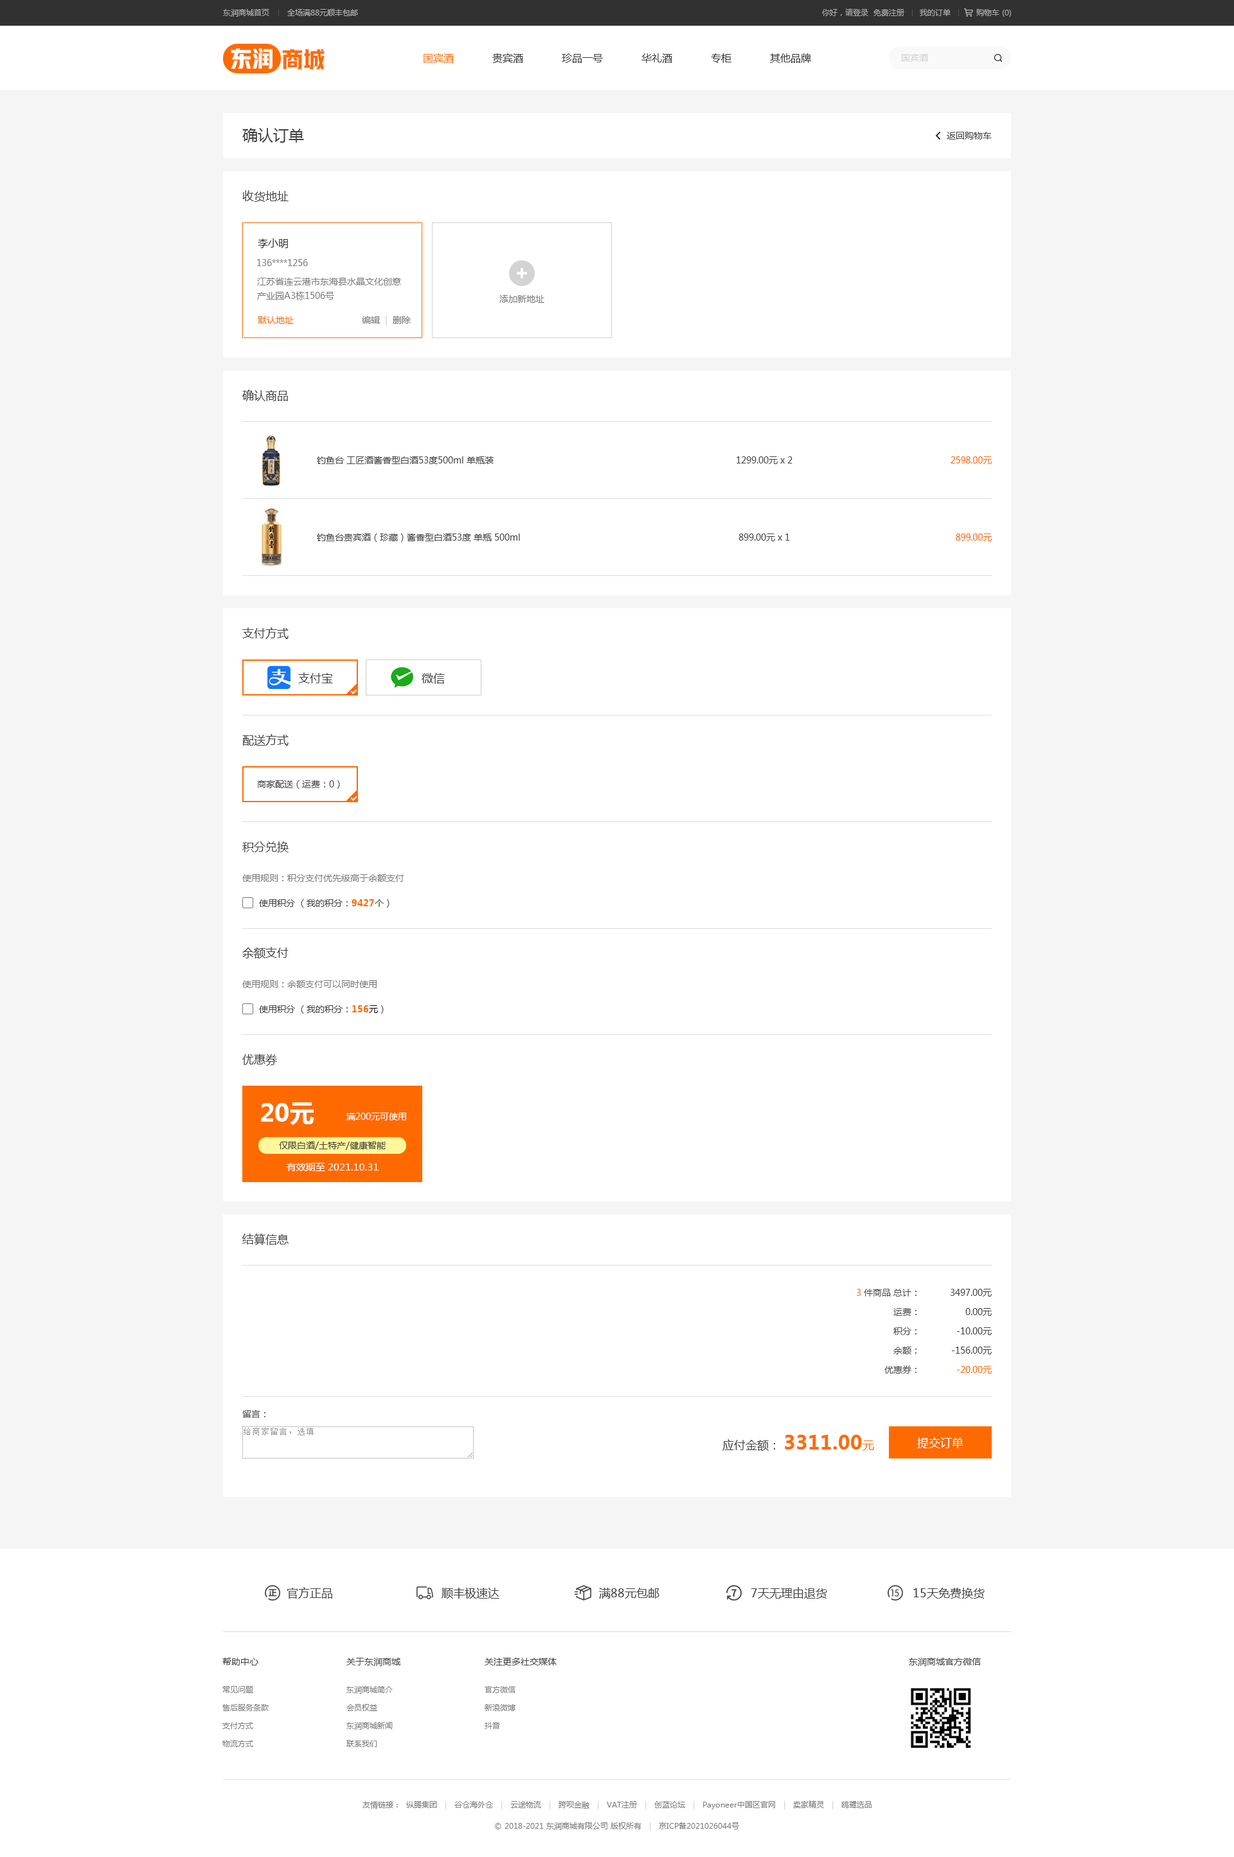
<style>
.page{position:relative;width:1234px;height:1857px;background:#ffffff}
.page>*{position:absolute;margin:0}
.t1{font:7.7px "MicrosoftYaHei";color:#b0b0b0}
.t2{font:7.7px "MicrosoftYaHei";color:#acacac}
.t3{font:21.9px "HYYakuHei-HEW";color:#ffffff}
.t4{font:21.9px "HYYakuHei-HEW";color:#ff6a00}
.t5{font:10.3px "MicrosoftYaHei";color:#333333}
.t6{font:10.3px "MicrosoftYaHei";color:#ff6a00}
.t7{font:9px "MicrosoftYaHei";color:#d2d2d2}
.t8{font:15.4px "MicrosoftYaHei";color:#434343}
.t9{font:9px "MicrosoftYaHei";color:#434343}
.t10{font:11.6px "MicrosoftYaHei";color:#434343}
.t11{font:10.3px "MicrosoftYaHei";color:#313131}
.t12{font:9px "MicrosoftYaHei";color:#7d7d7d}
.t13{font:9px/14.1px "MicrosoftYaHei";color:#7d7d7d}
.t14{font:9px "MicrosoftYaHei";color:#ff6a00}
.t15{font:9px "MicrosoftYaHei-Bold";color:#ff6a00}
.t16{font:9px "MicrosoftYaHei";color:#000000}
.t17{font:24.4px "MicrosoftYaHei-Bold";color:#ffffff}
.t18{font:9px "MicrosoftYaHei";color:#ffffff}
.t19{font:9.6px "MicrosoftYaHei";color:#ffffff}
.t20{font:9px/19.3px "MicrosoftYaHei";color:#4b4b4b}
.t21{font:9px/19.3px "MicrosoftYaHei";color:#ff6a00}
.t22{font:9px/19.3px "MicrosoftYaHei";color:#434343}
.t23{font:9px "MicrosoftYaHei";color:#4b4b4b}
.t24{font:19.3px "MicrosoftYaHei-Bold";color:#ff6a00}
.t25{font:11.6px "MicrosoftYaHei";color:#ff6a00}
.t26{font:11.6px "MicrosoftYaHei";color:#ffffff}
.t27{font:7.7px/18px "MicrosoftYaHei";color:#7d7d7d}
.t28{font:7.7px "MicrosoftYaHei";color:#7d7d7d}
.t29{font:7.7px "MicrosoftYaHei";color:#d2d2d2}
</style>
<div class="page">
<p class="t1" style="left:223px;top:9px;width:135px;height:8px">东润商城首页       全场满88元顺丰包邮</p>
<p class="t2" style="left:822px;top:8px;width:190px;height:9px">你好，请登录  免费注册      我的订单          购物车 (0)</p>
<p class="t3" style="left:231px;top:48px;width:42px;height:21px">东润</p>
<p class="t4" style="left:282px;top:49px;width:43px;height:20px">商城</p>
<p class="t5" style="left:424px;top:53px;width:387px;height:10px"><span class="t6">国宾酒</span>            贵宾酒            珍品一号            华礼酒            专柜            其他品牌</p>
<p class="t7" style="left:902px;top:54px;width:26px;height:8px">国宾酒</p>
<p class="t8" style="left:242px;top:128px;width:62px;height:15px">确认订单</p>
<p class="t9" style="left:947px;top:132px;width:45px;height:8px">返回购物车</p>
<p class="t10" style="left:242px;top:190px;width:47px;height:12px">收货地址</p>
<p class="t11" style="left:258px;top:239px;width:30px;height:9px">李小明</p>
<p class="t12" style="left:257px;top:259px;width:51px;height:7px">136****1256</p>
<p class="t13" style="left:257px;top:278px;width:144px;height:22px">江苏省连云港市东海县水晶文化创意<br>产业园A3栋1506号</p>
<p class="t12" style="left:500px;top:295px;width:44px;height:8px">添加新地址</p>
<p class="t14" style="left:258px;top:316px;width:36px;height:8px">默认地址</p>
<p class="t12" style="left:362px;top:316px;width:49px;height:9px">编辑 <span class="t7"> |</span>  删除</p>
<p class="t10" style="left:242px;top:390px;width:46px;height:11px">确认商品</p>
<p class="t9" style="left:317px;top:456px;width:177px;height:8px">钓鱼台 工匠酒酱香型白酒53度500ml 单瓶装</p>
<p class="t9" style="left:737px;top:456px;width:56px;height:8px">1299.00元 x 2</p>
<p class="t14" style="left:951px;top:456px;width:42px;height:8px">2598.00元</p>
<p class="t9" style="left:317px;top:534px;width:203px;height:8px">钓鱼台贵宾酒（珍藏）酱香型白酒53度 单瓶 500ml</p>
<p class="t9" style="left:739px;top:534px;width:51px;height:7px">899.00元 x 1</p>
<p class="t14" style="left:956px;top:534px;width:37px;height:7px">899.00元</p>
<p class="t10" style="left:242px;top:627px;width:47px;height:12px">支付方式</p>
<p class="t10" style="left:298px;top:672px;width:35px;height:11px">支付宝</p>
<p class="t10" style="left:422px;top:673px;width:23px;height:11px">微信</p>
<p class="t10" style="left:242px;top:734px;width:47px;height:12px">配送方式</p>
<p class="t9" style="left:257px;top:780px;width:83px;height:9px">商家配送（运费：0）</p>
<p class="t10" style="left:242px;top:842px;width:47px;height:10px">积分兑换</p>
<p class="t12" style="left:242px;top:874px;width:162px;height:8px">使用规则：积分支付优先级高于余额支付</p>
<p class="t9" style="left:259px;top:899px;width:131px;height:9px">使用积分 （我的积分：<span class="t15">9427</span>个）</p>
<p class="t10" style="left:242px;top:947px;width:47px;height:12px">余额支付</p>
<p class="t12" style="left:242px;top:980px;width:135px;height:8px">使用规则：余额支付可以同时使用</p>
<p class="t9" style="left:259px;top:1005px;width:125px;height:9px">使用积分 （我的积分：<span class="t15">156</span><span class="t16">元</span>）</p>
<p class="t10" style="left:242px;top:1054px;width:35px;height:12px">优惠券</p>
<p class="t17" style="left:261px;top:1102px;width:53px;height:23px">20元</p>
<p class="t18" style="left:346px;top:1113px;width:60px;height:7px">满200元可使用</p>
<p class="t9" style="left:279px;top:1142px;width:107px;height:8px">仅限白酒/土特产/健康智能</p>
<p class="t19" style="left:287px;top:1163px;width:92px;height:8px">有效期至 2021.10.31</p>
<p class="t10" style="left:242px;top:1234px;width:47px;height:11px">结算信息</p>
<p class="t20" style="left:857px;top:1289px;width:60px;height:85px;text-align:right"><span class="t21">3</span> 件商品 总计：<br>运费：<br>积分：<br>余额：<br>优惠券：</p>
<p class="t22" style="left:951px;top:1289px;width:41px;height:85px;text-align:right">3497.00元<br>0.00元<br>-10.00元<br>-156.00元<br><span class="t21">-20.00元</span></p>
<p class="t23" style="left:242px;top:1410px;width:24px;height:8px">留言：</p>
<p class="t24" style="left:723px;top:1434px;width:151px;height:17px"><span class="t10">应付金额： </span>3311.00<span class="t25">元</span></p>
<p class="t26" style="left:917px;top:1437px;width:47px;height:11px">提交订单</p>
<p class="t10" style="left:287px;top:1587px;width:45px;height:12px">官方正品</p>
<p class="t10" style="left:442px;top:1588px;width:58px;height:11px">顺丰极速达</p>
<p class="t10" style="left:599px;top:1588px;width:61px;height:11px">满88元包邮</p>
<p class="t10" style="left:751px;top:1587px;width:76px;height:12px">7天无理由退货</p>
<p class="t10" style="left:914px;top:1588px;width:71px;height:11px">15天免费换货</p>
<p class="t9" style="left:222px;top:1658px;width:36px;height:8px">帮助中心</p>
<p class="t9" style="left:346px;top:1658px;width:55px;height:8px">关于东润商城</p>
<p class="t9" style="left:485px;top:1658px;width:72px;height:8px">关注更多社交媒体</p>
<p class="t9" style="left:909px;top:1658px;width:72px;height:8px">东润商城官方微信</p>
<p class="t27" style="left:222px;top:1686px;width:47px;height:61px">常见问题<br>售后服务条款<br>支付方式<br>物流方式</p>
<p class="t27" style="left:346px;top:1686px;width:47px;height:61px">东润商城简介<br>会员权益<br>东润商城新闻<br>联系我们</p>
<p class="t27" style="left:485px;top:1686px;width:31px;height:43px">官方微信<br>新浪微博<br>抖音</p>
<p class="t28" style="left:363px;top:1801px;width:509px;height:9px">友情链接：  纵腾集团   <span class="t29">|   </span>谷仓海外仓   <span class="t29">|   </span>云途物流   <span class="t29">|   </span>跨呗金融   <span class="t29">|   </span>VAT注册   <span class="t29">|   </span>创蓝论坛   <span class="t29">|   </span>Payoneer中国区官网   <span class="t29">|   </span>卖家精灵   <span class="t29">|   </span>鸥鹭选品</p>
<p class="t28" style="left:495px;top:1823px;width:244px;height:8px">© 2018-2021 东润商城有限公司 版权所有   <span class="t29">|   </span>京ICP备2021026044号</p>
</div>
